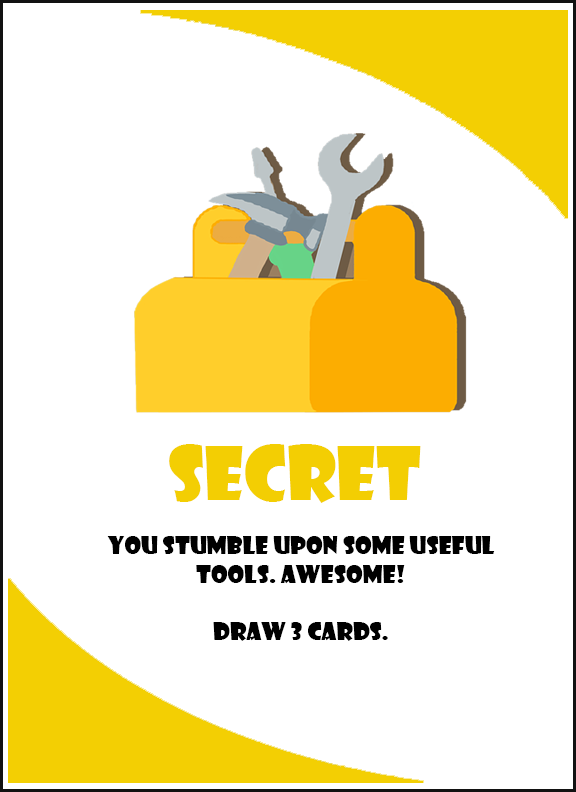
<style>
.page{position:relative;width:576px;height:792px;background:#ffffff}
.page>*{position:absolute;margin:0}
.t1{font:72px "ShowcardGothic-Reg";color:#f3ce03}
.t2{font:24px "ShowcardGothic-Reg";color:#000000}
</style>
<div class="page">
<p class="t1" style="left:169px;top:444px;width:252px;height:59px">SECRET</p>
<p class="t2" style="left:107px;top:536px;width:388px;height:105px;text-align:center">You stumble upon some useful tools. Awesome!<br><br>Draw 3 cards.</p>
</div>
